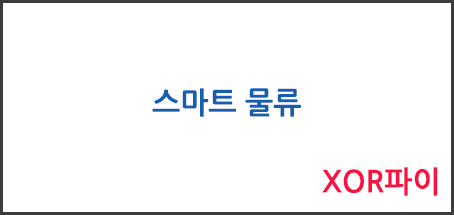
<style>
.page{position:relative;width:454px;height:215px;background:#ffffff}
.page>*{position:absolute;margin:0}
.t1{font:30px "NanumGothicBold";color:#165eb0}
.t2{font:30px "NanumGothicBold";color:#f81344}
</style>
<div class="page">
<p class="t1" style="left:152px;top:88px;width:149px;height:29px">스마트 물류</p>
<p class="t2" style="left:322px;top:167px;width:116px;height:29px">XOR파이</p>
</div>
